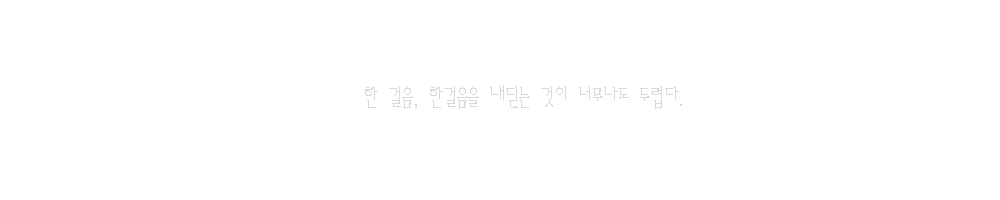
<style>
.page{position:relative;width:1000px;height:200px;background:#ffffff}
.page>*{position:absolute;margin:0}
.t1{font:24px "AmiR-HM";color:#d9d9d9}
</style>
<div class="page">
<p class="t1" style="left:364px;top:86px;width:318px;height:23px">한 걸음, 한걸음을 내딛는 것이 너무나도 두렵다.</p>
</div>
